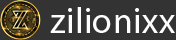
<style>
.page{position:relative;width:176px;height:40px;background:#333333}
.page>*{position:absolute;margin:0}
.t1{font:36.1px "MyriadPro-Regular";letter-spacing:0.01em;color:#ffffff}
</style>
<div class="page">
<p class="t1" style="left:50px;top:7px;width:125px;height:26px">zilionixx</p>
</div>
